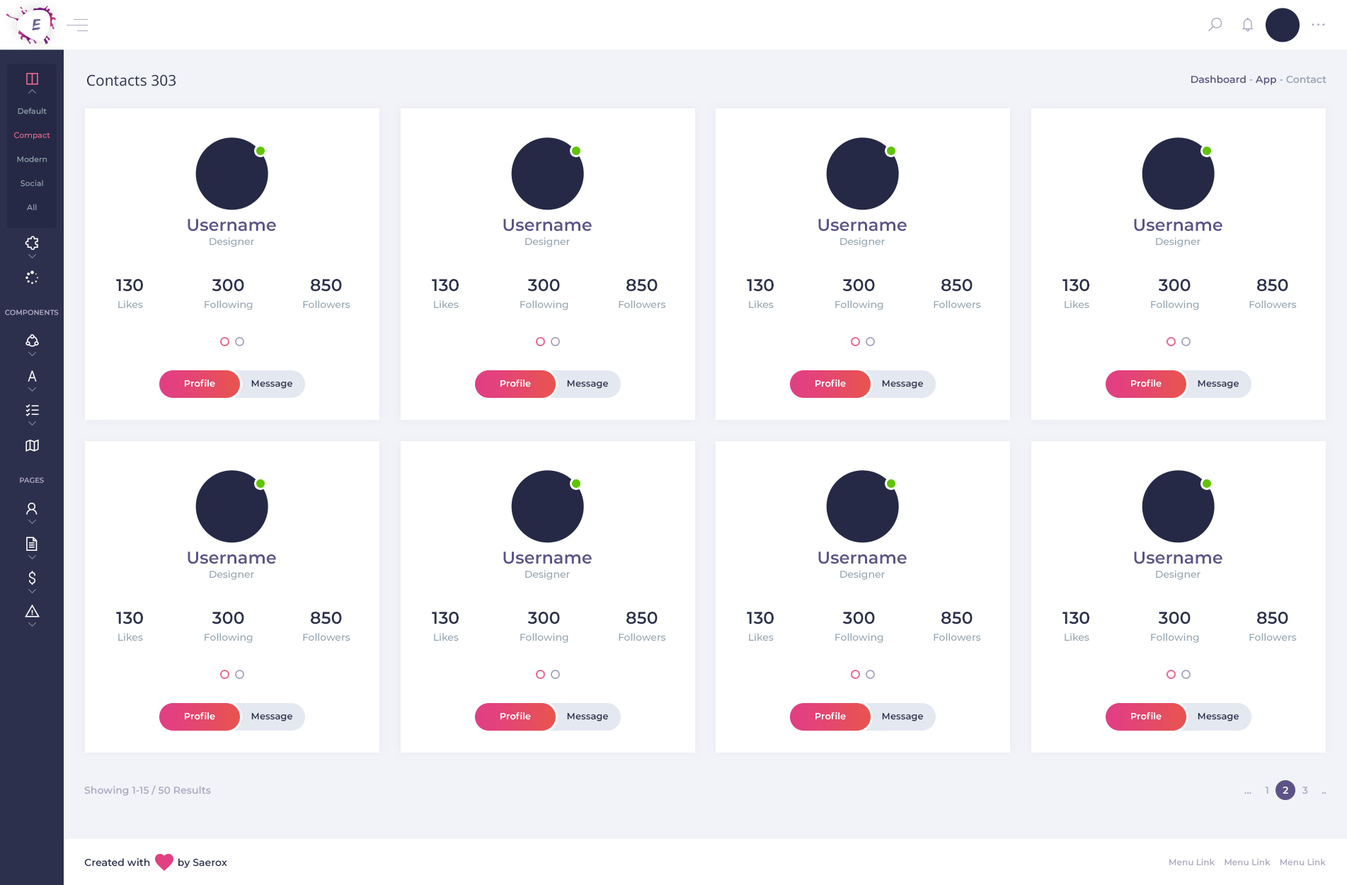
<style>
.page{position:relative;width:1347px;height:885px;background:#ffffff}
.page>*{position:absolute;margin:0}
.t1{font:14.9px "NotoSans-Regular";color:#2c304d}
.t2{font:9.9px "Montserrat-SemiBold";color:#5d5386}
.t3{font:9.9px "Montserrat-SemiBold";color:#94a4b0}
.t4{font:7.8px/24.1px "Montserrat-Medium";color:#98a8b4}
.t5{font:7.8px/24.1px "Montserrat-Medium";color:#e76c90}
.t6{font:17px/14.2px "Montserrat-SemiBold";color:#5d5386}
.t7{font:9.9px/14.2px "Montserrat-Medium";color:#94a4b0}
.t8{font:9.9px/17px "Montserrat-Medium";color:#94a4b0}
.t9{font:17px/17px "Montserrat-SemiBold";color:#2c304d}
.t10{font:7.1px "Montserrat-SemiBold";color:#aea9c3;text-transform:uppercase}
.t11{font:9.2px "Montserrat-SemiBold";color:#ffffff}
.t12{font:9.2px "Montserrat-SemiBold";color:#2c304d}
.t13{font:9.9px "Montserrat-SemiBold";color:#aea9c3}
.t14{font:9.9px "Montserrat-SemiBold";color:#2c304d}
.t15{font:8.5px "Montserrat-SemiBold";color:#aea9c3}
</style>
<div class="page">
<p class="t1" style="left:87px;top:74px;width:89px;height:12px">Contacts 303</p>
<p class="t2" style="left:1192px;top:75px;width:135px;height:10px">Dashboard<span class="t3"> - </span>App<span class="t3"> - Contact</span></p>
<p class="t4" style="left:14px;top:108px;width:36px;height:102px;text-align:center">Default<br><span class="t5">Compact<br></span>Modern<br>Social<br>All</p>
<p class="t6" style="left:188px;top:219px;width:88px;height:28px;text-align:center">Username<br><span class="t7">Designer</span></p>
<p class="t6" style="left:503px;top:219px;width:89px;height:28px;text-align:center">Username<br><span class="t7">Designer</span></p>
<p class="t6" style="left:818px;top:219px;width:89px;height:28px;text-align:center">Username<br><span class="t7">Designer</span></p>
<p class="t6" style="left:1134px;top:219px;width:89px;height:28px;text-align:center">Username<br><span class="t7">Designer</span></p>
<p class="t8" style="left:116px;top:279px;width:27px;height:29px;text-align:center"><span class="t9">130<br></span>Likes</p>
<p class="t8" style="left:205px;top:279px;width:48px;height:31px;text-align:center"><span class="t9">300<br></span>Following</p>
<p class="t8" style="left:303px;top:279px;width:47px;height:29px;text-align:center"><span class="t9">850<br></span>Followers</p>
<p class="t8" style="left:432px;top:279px;width:27px;height:29px;text-align:center"><span class="t9">130<br></span>Likes</p>
<p class="t8" style="left:520px;top:279px;width:49px;height:31px;text-align:center"><span class="t9">300<br></span>Following</p>
<p class="t8" style="left:619px;top:279px;width:47px;height:29px;text-align:center"><span class="t9">850<br></span>Followers</p>
<p class="t8" style="left:747px;top:279px;width:27px;height:29px;text-align:center"><span class="t9">130<br></span>Likes</p>
<p class="t8" style="left:835px;top:279px;width:49px;height:31px;text-align:center"><span class="t9">300<br></span>Following</p>
<p class="t8" style="left:934px;top:279px;width:47px;height:29px;text-align:center"><span class="t9">850<br></span>Followers</p>
<p class="t8" style="left:1063px;top:279px;width:27px;height:29px;text-align:center"><span class="t9">130<br></span>Likes</p>
<p class="t8" style="left:1151px;top:279px;width:48px;height:31px;text-align:center"><span class="t9">300<br></span>Following</p>
<p class="t8" style="left:1250px;top:279px;width:47px;height:29px;text-align:center"><span class="t9">850<br></span>Followers</p>
<p class="t10" style="left:5px;top:309px;width:54px;height:6px">Components</p>
<p class="t11" style="left:185px;top:379px;width:30px;height:8px">Profile</p>
<p class="t12" style="left:251px;top:380px;width:41px;height:9px">Message</p>
<p class="t11" style="left:501px;top:379px;width:30px;height:8px">Profile</p>
<p class="t12" style="left:567px;top:380px;width:41px;height:9px">Message</p>
<p class="t11" style="left:816px;top:379px;width:30px;height:8px">Profile</p>
<p class="t12" style="left:882px;top:380px;width:41px;height:9px">Message</p>
<p class="t11" style="left:1131px;top:379px;width:31px;height:8px">Profile</p>
<p class="t12" style="left:1198px;top:380px;width:41px;height:9px">Message</p>
<p class="t10" style="left:20px;top:477px;width:24px;height:6px">Pages</p>
<p class="t6" style="left:188px;top:552px;width:88px;height:28px;text-align:center">Username<br><span class="t7">Designer</span></p>
<p class="t6" style="left:503px;top:552px;width:89px;height:28px;text-align:center">Username<br><span class="t7">Designer</span></p>
<p class="t6" style="left:818px;top:552px;width:89px;height:28px;text-align:center">Username<br><span class="t7">Designer</span></p>
<p class="t6" style="left:1134px;top:552px;width:89px;height:28px;text-align:center">Username<br><span class="t7">Designer</span></p>
<p class="t8" style="left:116px;top:612px;width:27px;height:29px;text-align:center"><span class="t9">130<br></span>Likes</p>
<p class="t8" style="left:205px;top:612px;width:48px;height:31px;text-align:center"><span class="t9">300<br></span>Following</p>
<p class="t8" style="left:303px;top:612px;width:47px;height:29px;text-align:center"><span class="t9">850<br></span>Followers</p>
<p class="t8" style="left:432px;top:612px;width:27px;height:29px;text-align:center"><span class="t9">130<br></span>Likes</p>
<p class="t8" style="left:520px;top:612px;width:49px;height:31px;text-align:center"><span class="t9">300<br></span>Following</p>
<p class="t8" style="left:619px;top:612px;width:47px;height:29px;text-align:center"><span class="t9">850<br></span>Followers</p>
<p class="t8" style="left:747px;top:612px;width:27px;height:29px;text-align:center"><span class="t9">130<br></span>Likes</p>
<p class="t8" style="left:835px;top:612px;width:49px;height:31px;text-align:center"><span class="t9">300<br></span>Following</p>
<p class="t8" style="left:934px;top:612px;width:47px;height:29px;text-align:center"><span class="t9">850<br></span>Followers</p>
<p class="t8" style="left:1063px;top:612px;width:27px;height:29px;text-align:center"><span class="t9">130<br></span>Likes</p>
<p class="t8" style="left:1151px;top:612px;width:48px;height:31px;text-align:center"><span class="t9">300<br></span>Following</p>
<p class="t8" style="left:1250px;top:612px;width:47px;height:29px;text-align:center"><span class="t9">850<br></span>Followers</p>
<p class="t11" style="left:185px;top:712px;width:30px;height:8px">Profile</p>
<p class="t12" style="left:251px;top:713px;width:41px;height:8px">Message</p>
<p class="t11" style="left:501px;top:712px;width:30px;height:8px">Profile</p>
<p class="t12" style="left:567px;top:713px;width:41px;height:8px">Message</p>
<p class="t11" style="left:816px;top:712px;width:30px;height:8px">Profile</p>
<p class="t12" style="left:882px;top:713px;width:41px;height:8px">Message</p>
<p class="t11" style="left:1131px;top:712px;width:31px;height:8px">Profile</p>
<p class="t12" style="left:1198px;top:713px;width:41px;height:8px">Message</p>
<p class="t13" style="left:84px;top:785px;width:127px;height:11px">Showing 1-15 / 50 Results</p>
<p class="t14" style="left:84px;top:858px;width:143px;height:10px">Created with          by Saerox</p>
<p class="t15" style="left:1170px;top:858px;width:156px;height:8px">Menu Link    Menu Link    Menu Link</p>
</div>
